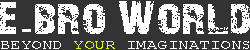
<style>
.page{position:relative;width:250px;height:50px;background:#333333}
.page>*{position:absolute;margin:0}
.t1{font:13.8px "CourierNewPSMT";color:#ffffff;scale:1.27 1}
.t2{font:13.8px "CourierNewPSMT";color:#d8f800;scale:1.27 1}
</style>
<div class="page">
<p class="t1" style="left:1px;top:41px;width:248px;height:8px">BEYOND <span class="t2">YOUR </span>IMAGINATIONS</p>
</div>
